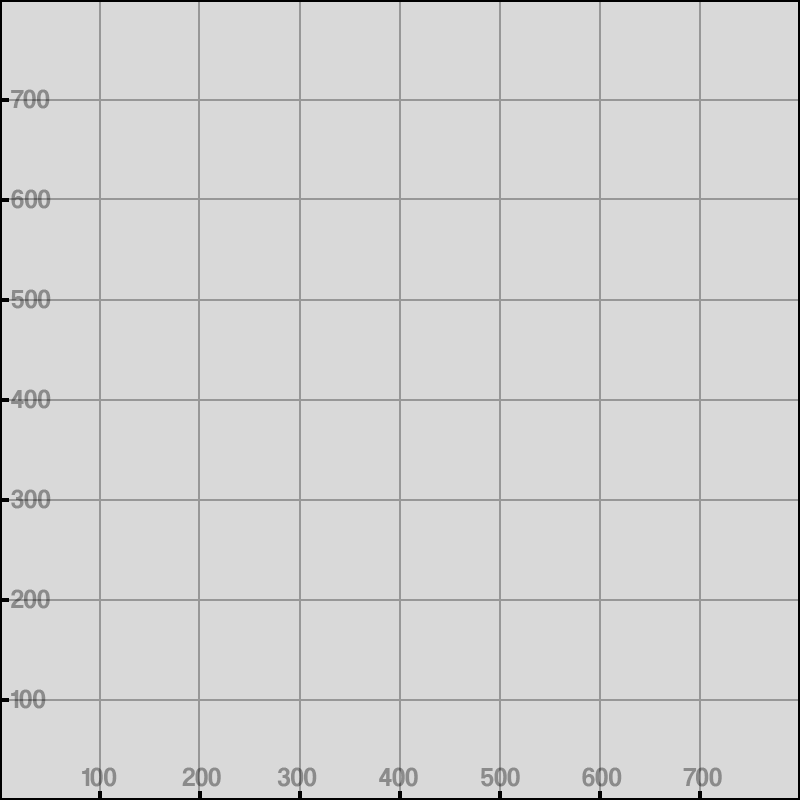
<style>
.page{position:relative;width:800px;height:800px;background:#d9d9d9}
.page>*{position:absolute;margin:0}
.t1{font:27.1px/100px "CoolveticaRg-Regular";color:#8b8b8b}
.t2{font:27.1px "CoolveticaRg-Regular";color:#8b8b8b}
</style>
<div class="page">
<p class="t1" style="left:11px;top:89px;width:40px;height:620px">700<br>600<br>500<br>400<br>300<br>200<br>100</p>
<p class="t2" style="left:82px;top:767px;width:640px;height:20px">100         200        300        400         500        600        700</p>
</div>
